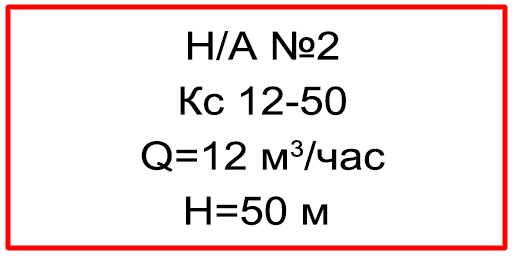
<style>
.page{position:relative;width:512px;height:256px;background:#ffffff}
.page>*{position:absolute;margin:0}
.t1{font:39.1px/55px "ArialMT";color:#000000;scale:1.12 1}
</style>
<div class="page">
<p class="t1" style="left:141px;top:31px;width:244px;height:195px;text-align:center">Н/А №2<br>Кс 12-50<br>Q=12 м3/час<br>Н=50 м</p>
</div>
